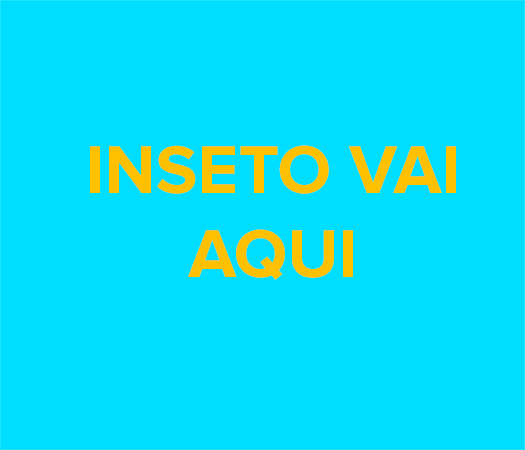
<style>
.page{position:relative;width:525px;height:450px;background:#00deff}
.page>*{position:absolute;margin:0}
.t1{font:70px "ProximaNova-Bold";color:#ffc000}
</style>
<div class="page">
<p class="t1" style="left:90px;top:145px;width:366px;height:135px;text-align:center">INSETO VAI<br>AQUI</p>
</div>
